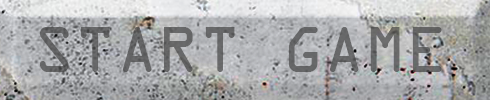
<style>
.page{position:relative;width:490px;height:100px}
.page>*{position:absolute;margin:0}
.t1{font:68.6px "OCRAExtended";color:#666668}
</style>
<div class="page">
<p class="t1" style="left:39px;top:27px;width:403px;height:45px">START GAME</p>
</div>
